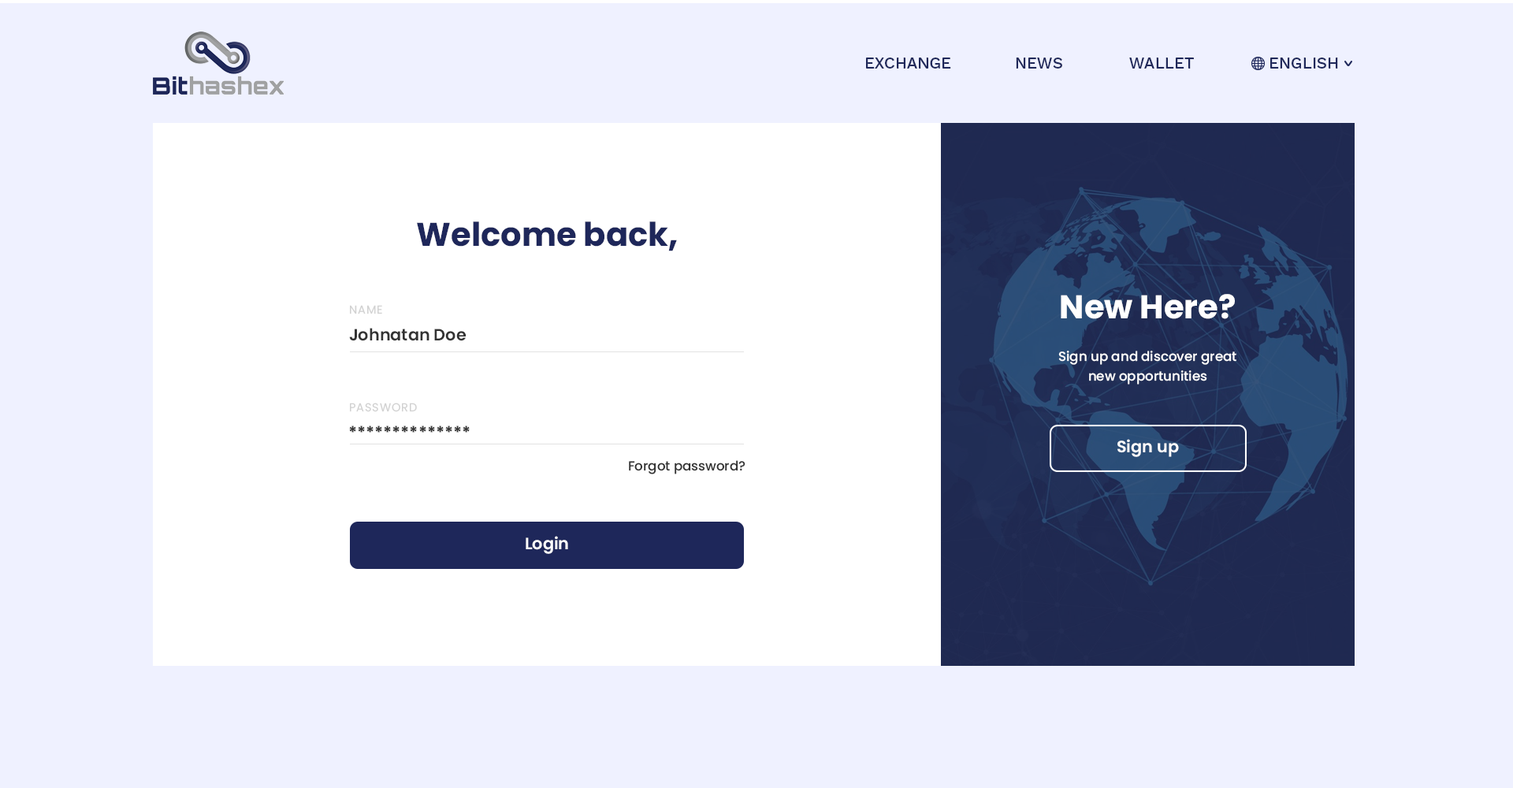
<style>
.page{position:relative;width:1513px;height:788px;background:#eff1ff}
.page>*{position:absolute;margin:0}
.t1{font:16.1px "WorkSans-Medium";color:#1e2759;text-transform:uppercase}
.t2{font:32.8px "Poppins-Bold";color:#1e275a}
.t3{font:32.8px "Poppins-Bold";color:#ffffff}
.t4{font:11.5px "Poppins-Regular";letter-spacing:0.06em;color:#d2d2d2;text-transform:uppercase}
.t5{font:16.4px "Poppins-SemiBold";color:#333333}
.t6{font:13.1px/19.7px "Poppins-Medium";color:#ffffff}
.t7{font:16.4px "Poppins-Bold";color:#333333}
.t8{font:16.4px "Poppins-SemiBold";color:#ffffff}
.t9{font:13.1px "Poppins-Medium";color:#333333}
</style>
<div class="page">
<p class="t1" style="left:866px;top:58px;width:85px;height:11px">exchange</p>
<p class="t1" style="left:1016px;top:58px;width:46px;height:11px">news</p>
<p class="t1" style="left:1129px;top:58px;width:65px;height:11px">wallet</p>
<p class="t1" style="left:1270px;top:58px;width:68px;height:11px">english</p>
<p class="t2" style="left:417px;top:221px;width:260px;height:30px">Welcome back,</p>
<p class="t3" style="left:1061px;top:294px;width:174px;height:25px">New Here?</p>
<p class="t4" style="left:350px;top:305px;width:32px;height:9px">Name</p>
<p class="t5" style="left:349px;top:328px;width:118px;height:13px">Johnatan Doe</p>
<p class="t6" style="left:1058px;top:351px;width:178px;height:34px;text-align:center">Sign up and discover great<br>new opportunities</p>
<p class="t4" style="left:350px;top:403px;width:67px;height:9px">Password</p>
<p class="t7" style="left:349px;top:426px;width:121px;height:7px">**************</p>
<p class="t8" style="left:1117px;top:439px;width:62px;height:18px">Sign up</p>
<p class="t9" style="left:629px;top:460px;width:117px;height:14px">Forgot password?</p>
<p class="t8" style="left:526px;top:536px;width:42px;height:18px">Login</p>
</div>
